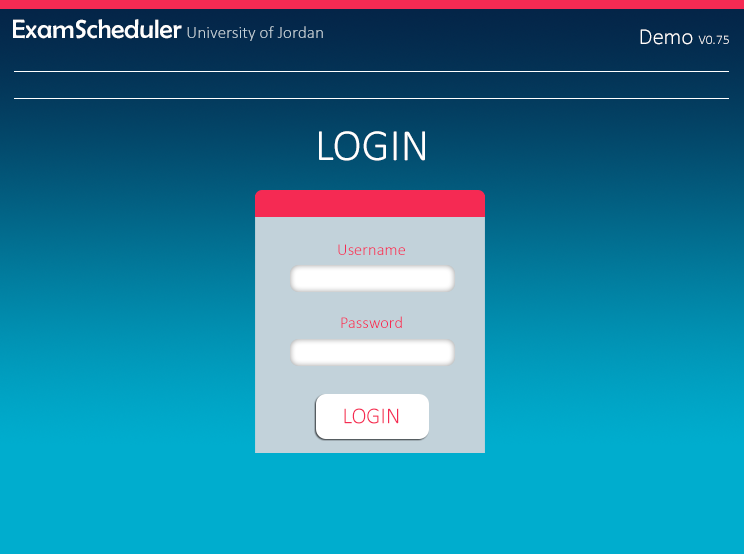
<style>
.page{position:relative;width:744px;height:554px}
.page>*{position:absolute;margin:0}
.t1{font:26.7px "BerlinSansFB-Reg";color:#fefefe}
.t2{font:17.3px "Calibri-Light";color:#c2d2da}
.t3{font:13.3px "Calibri-Light";color:#fefefe}
.t4{font:22.7px "Calibri-Light";color:#fefefe}
.t5{font:44.7px "Calibri-Light";color:#ffffff}
.t6{font:16.7px "Calibri-Light";color:#f52a53}
.t7{font:22.7px "Calibri-Light";color:#f52a53}
</style>
<div class="page">
<p class="t1" style="left:13px;top:19px;width:169px;height:20px">ExamScheduler</p>
<p class="t2" style="left:187px;top:26px;width:136px;height:15px">University of Jordan</p>
<p class="t3" style="left:640px;top:29px;width:89px;height:16px"><span class="t4">Demo </span>V0.75</p>
<p class="t5" style="left:319px;top:131px;width:106px;height:30px">LOGIN</p>
<p class="t6" style="left:338px;top:244px;width:67px;height:11px">Username</p>
<p class="t6" style="left:341px;top:316px;width:61px;height:12px">Password</p>
<p class="t7" style="left:344px;top:408px;width:55px;height:16px">LOGIN</p>
</div>
